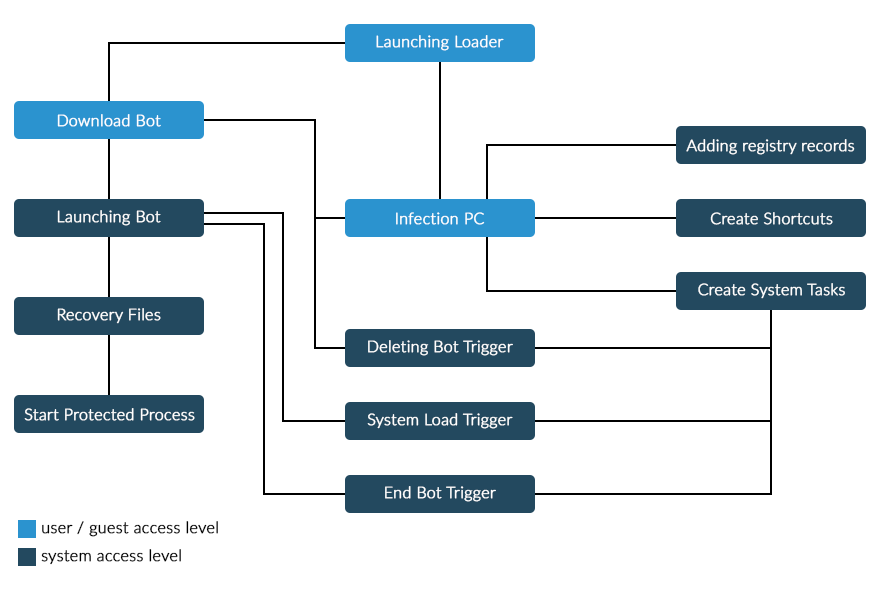
<style>
.page{position:relative;width:880px;height:590px;background:#ffffff}
.page>*{position:absolute;margin:0}
.t1{font:16px "Lato-Light";color:#ffffff;font-weight:bold}
.t2{font:16px "Lato-Light";color:#000000;font-weight:bold}
</style>
<div class="page">
<p class="t1" style="left:376px;top:35px;width:128px;height:16px">Launching Loader</p>
<p class="t1" style="left:57px;top:114px;width:104px;height:13px">Download Bot</p>
<p class="t1" style="left:686px;top:139px;width:169px;height:16px">Adding registry records</p>
<p class="t1" style="left:57px;top:210px;width:104px;height:16px">Launching Bot</p>
<p class="t1" style="left:396px;top:212px;width:89px;height:13px">Infection PC</p>
<p class="t1" style="left:710px;top:212px;width:123px;height:13px">Create Shortcuts</p>
<p class="t1" style="left:698px;top:283px;width:147px;height:16px">Create System Tasks</p>
<p class="t1" style="left:57px;top:308px;width:104px;height:16px">Recovery Files</p>
<p class="t1" style="left:368px;top:340px;width:145px;height:16px">Deleting Bot Trigger</p>
<p class="t1" style="left:24px;top:408px;width:171px;height:13px">Start Protected Process</p>
<p class="t1" style="left:367px;top:413px;width:146px;height:16px">System Load Trigger</p>
<p class="t1" style="left:385px;top:486px;width:111px;height:16px">End Bot Trigger</p>
<p class="t2" style="left:42px;top:521px;width:176px;height:16px">user / guest access level</p>
<p class="t2" style="left:41px;top:549px;width:140px;height:16px">system access level</p>
</div>
